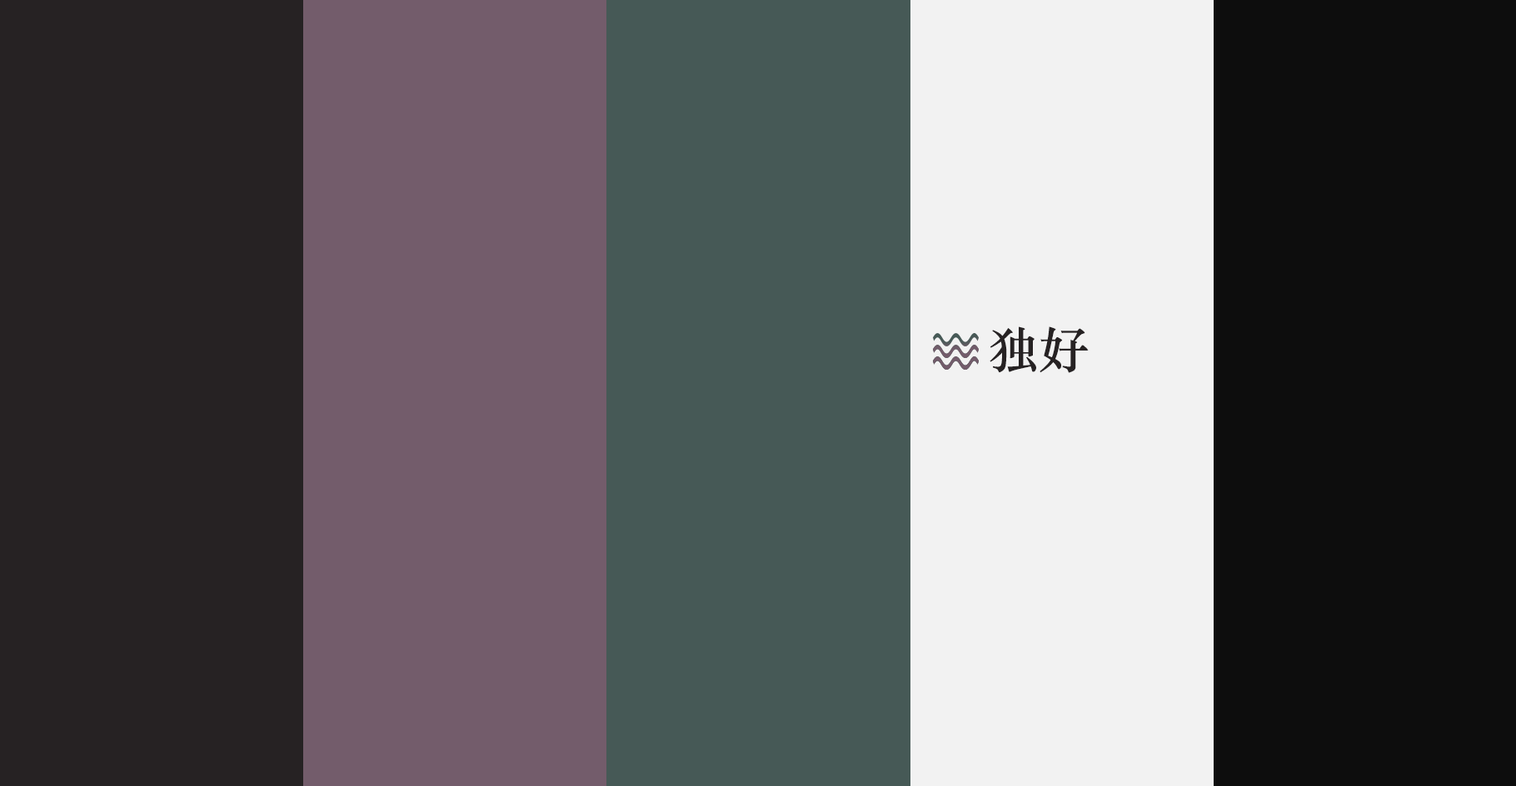
<style>
.page{position:relative;width:1516px;height:786px;background:#262223}
.page>*{position:absolute;margin:0}
.t1{font:50px "STZhongsong";color:#262223}
</style>
<div class="page">
<p class="t1" style="left:990px;top:327px;width:99px;height:46px">独好</p>
</div>
